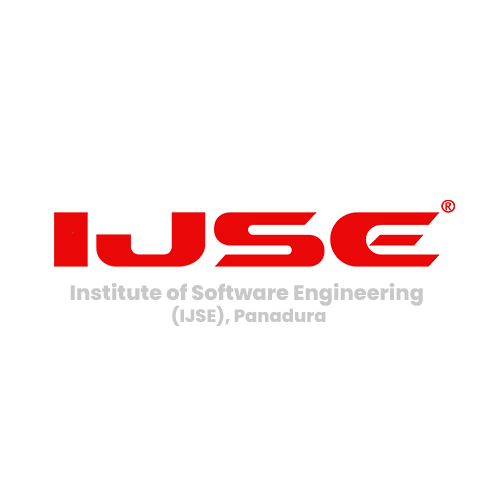
<style>
.page{position:relative;width:500px;height:500px;background:#ffffff}
.page>*{position:absolute;margin:0}
.t1{font:20.9px "Poppins-ExtraBold";color:#c8c8c8}
.t2{font:17.9px "Poppins-ExtraBold";color:#c8c8c8}
</style>
<div class="page">
<p class="t1" style="left:70px;top:283px;width:353px;height:43px;text-align:center">Institute of Software Engineering <br><span class="t2">(IJSE), Panadura</span></p>
</div>
